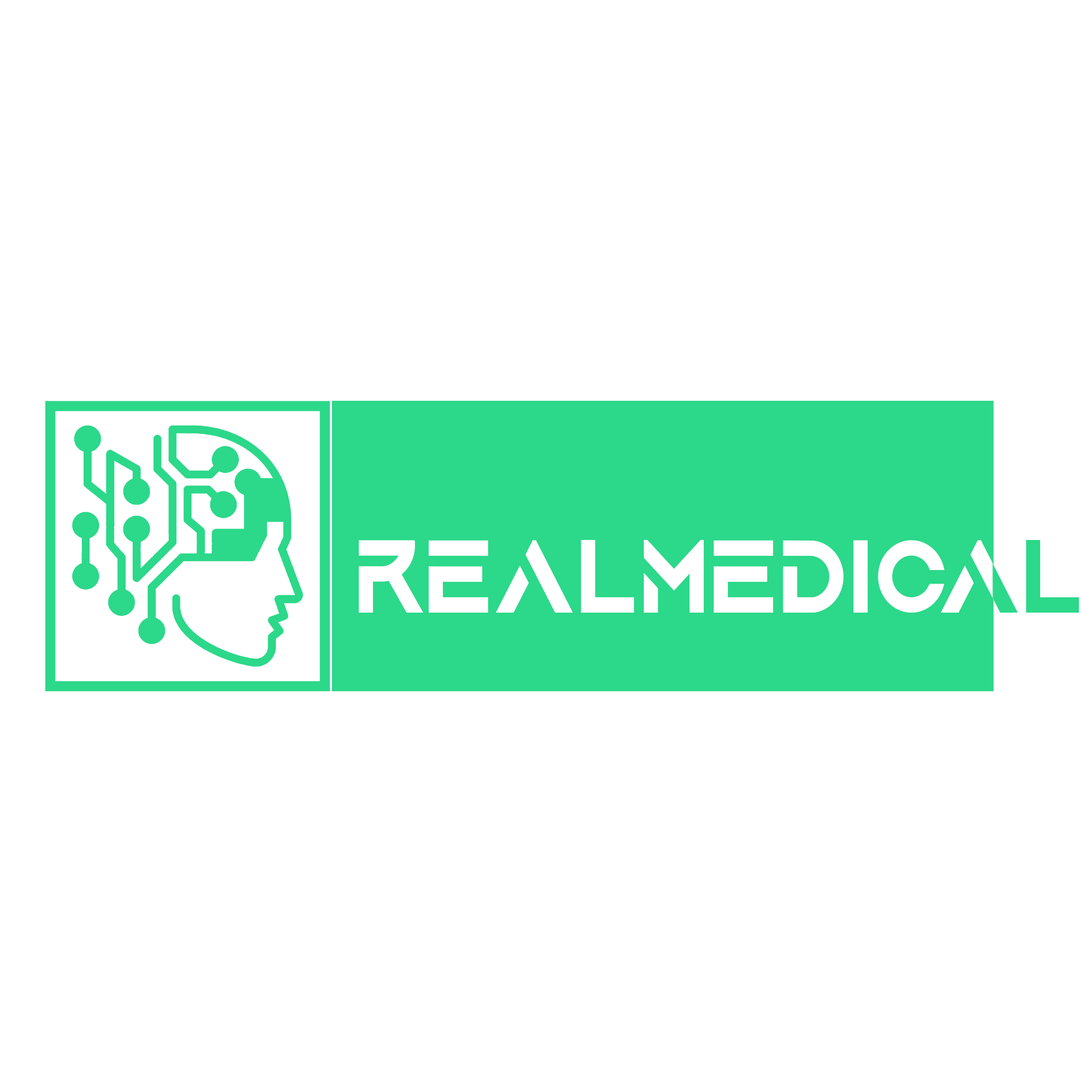
<style>
.page{position:relative;width:1092px;height:1092px;background:#ffffff}
.page>*{position:absolute;margin:0}
.t1{font:109.2px "AquireBold";color:#ffffff;scale:0.92 1}
</style>
<div class="page">
<p class="t1" style="left:359px;top:539px;width:720px;height:74px">RealMedical</p>
</div>
